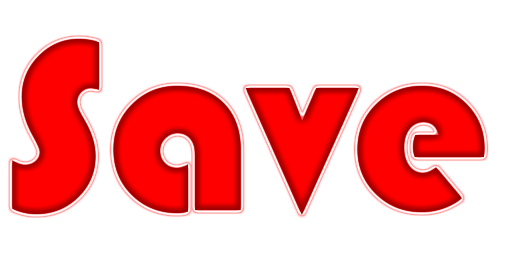
<style>
.page{position:relative;width:512px;height:256px;background:#ffffff}
.page>*{position:absolute;margin:0}
.t1{font:250px "Bauhaus93"}
</style>
<div class="page">
<p class="t1" style="left:12px;top:39px;width:473px;height:176px">Save</p>
</div>
